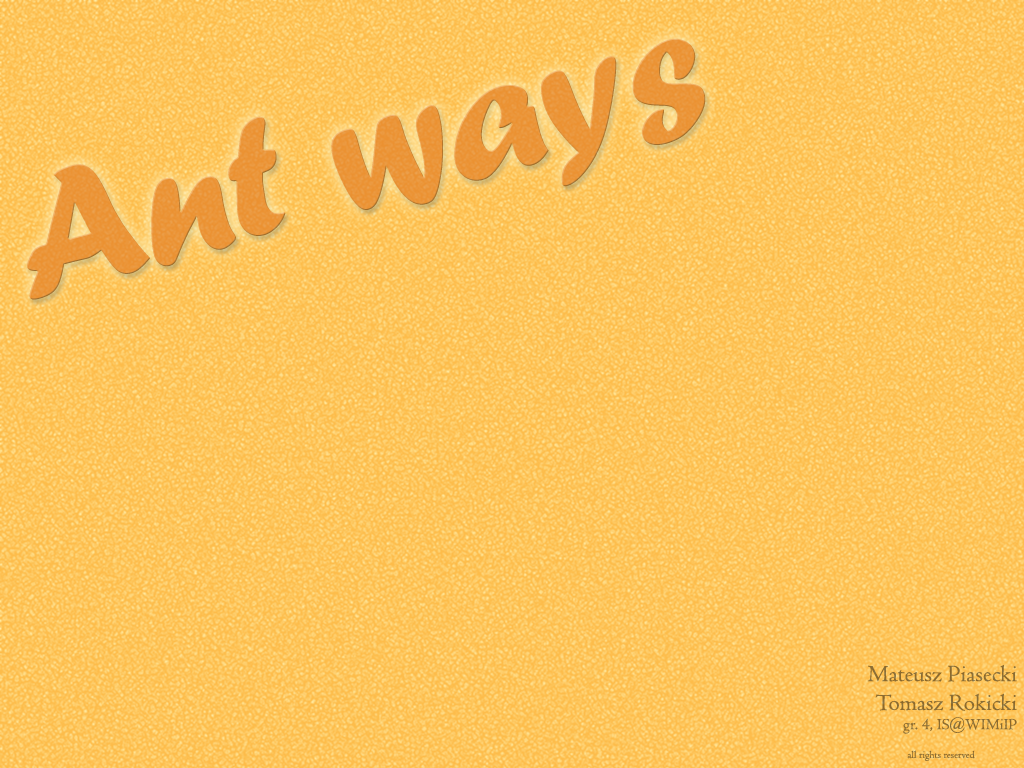
<style>
.page{position:relative;width:1024px;height:768px}
.page>*{position:absolute;margin:0}
.t1{font:177.4px "ForteMT";color:#eb9539}
.t2{font:24px "Centaur";color:#8b6c32}
.t3{font:16px "Centaur";color:#8b6c32}
.t4{font:10.7px "Centaur";color:#8b6c32}
</style>
<div class="page">
<p class="t1" style="left:27px;top:38px;width:679px;height:262px;rotate:-15deg">Ant ways</p>
<p class="t2" style="left:867px;top:665px;width:150px;height:96px;text-align:right">Mateusz Piasecki<br>Tomasz Rokicki<br><span class="t3">gr. 4, IS@WIMiIP<br><br></span><span class="t4">all rights reserved</span></p>
</div>
